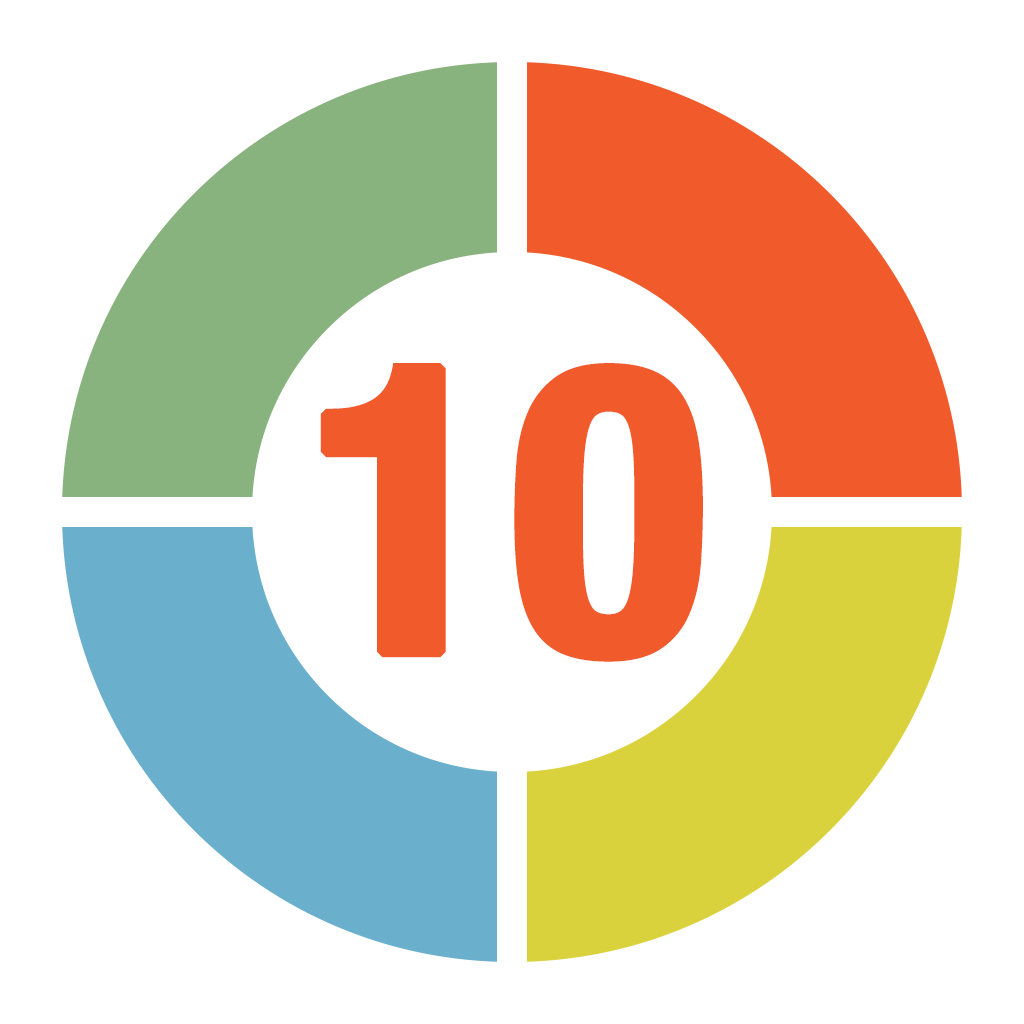
<style>
.page{position:relative;width:1024px;height:1024px;background:#ffffff}
.page>*{position:absolute;margin:0}
.t1{font:400px "HelveticaNeue-CondensedBold";color:#f15a2a;font-weight:bold}
</style>
<div class="page">
<p class="t1" style="left:320px;top:363px;width:383px;height:299px">10</p>
</div>
